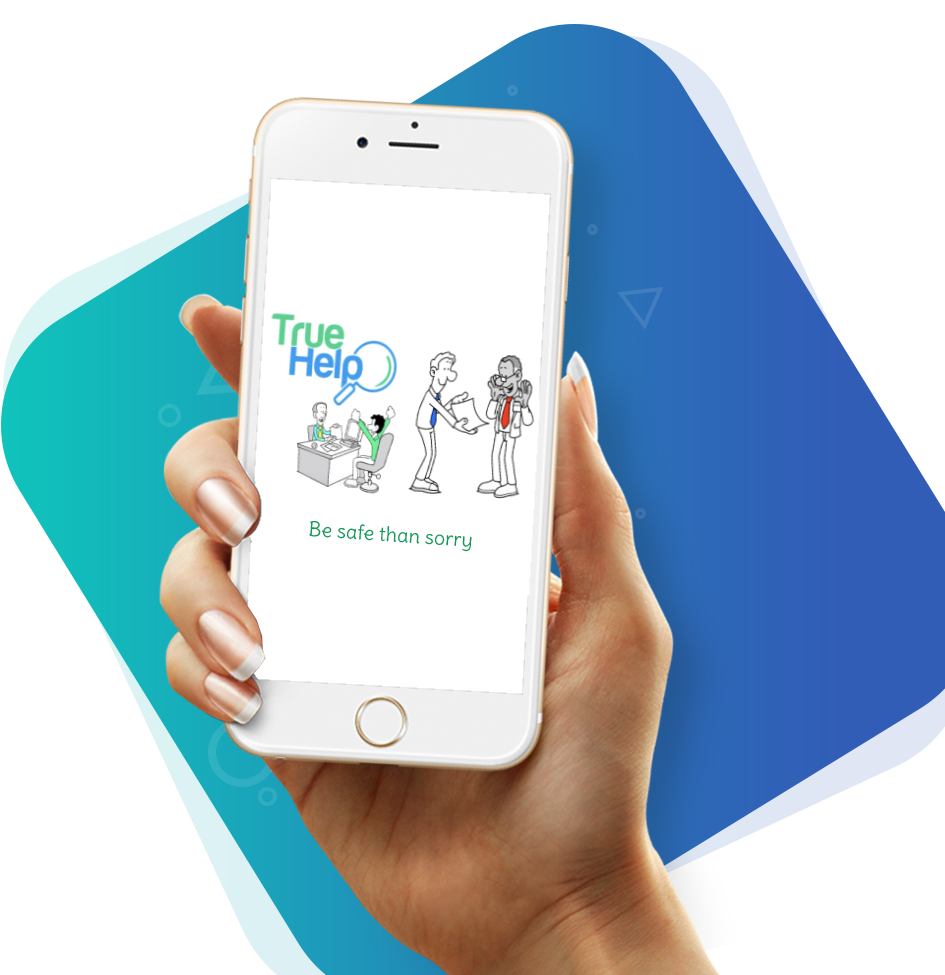
<style>
.page{position:relative;width:945px;height:975px;background:#ffffff}
.page>*{position:absolute;margin:0}
.t1{font:20px "Delius-Regular";color:#199959}
</style>
<div class="page">
<p class="t1" style="left:309px;top:520px;width:163px;height:32px;rotate:4deg">Be safe than sorry</p>
</div>
